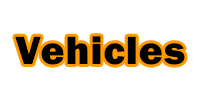
<style>
.page{position:relative;width:200px;height:100px;background:#ffffff}
.page>*{position:absolute;margin:0}
.t1{font:40.6px "FranklinGothic-Heavy";letter-spacing:0.025em;color:#ff8400}
</style>
<div class="page">
<p class="t1" style="left:15px;top:36px;width:170px;height:29px">Vehicles</p>
</div>
